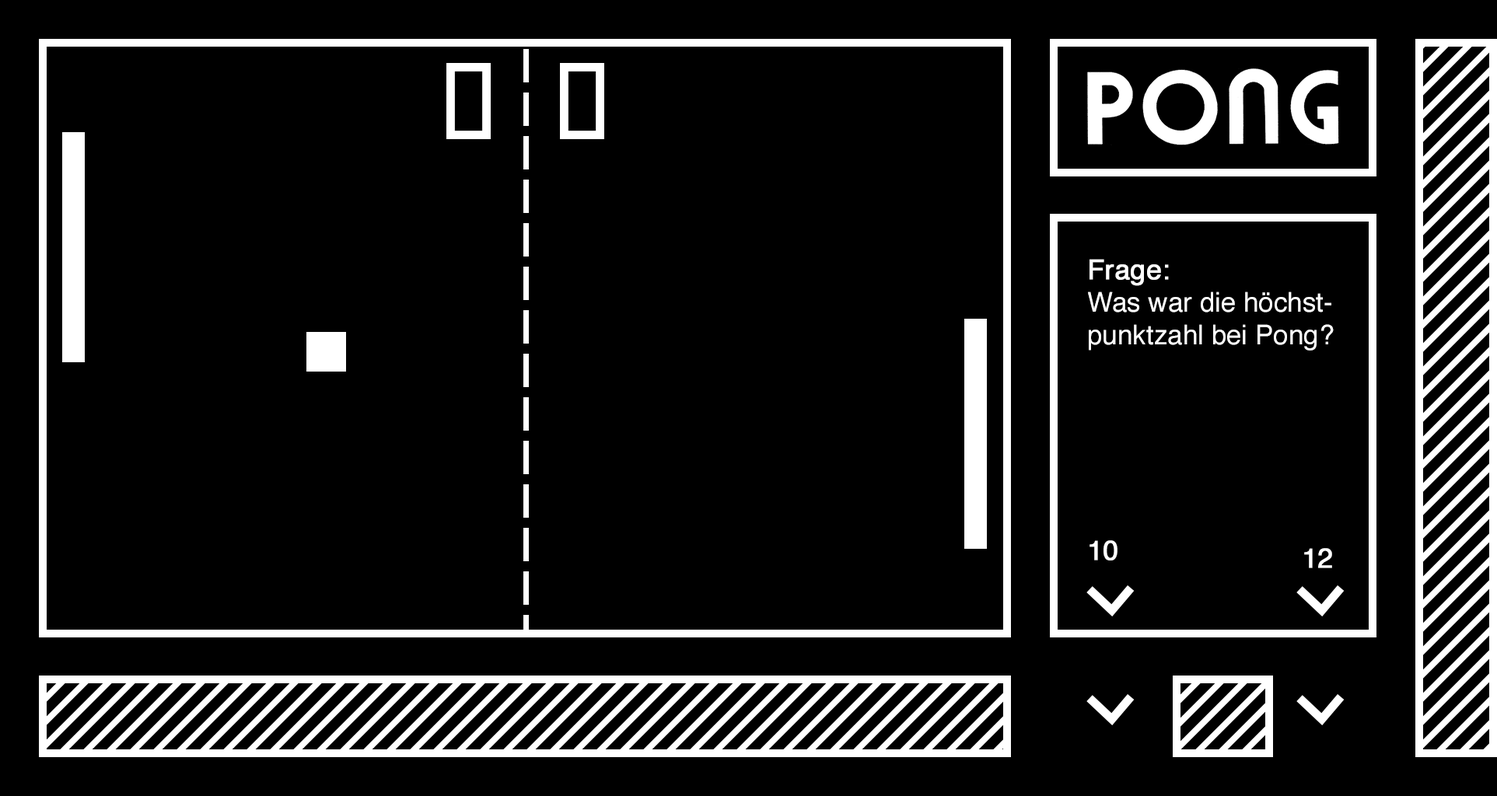
<style>
.page{position:relative;width:1497px;height:796px;background:#000000}
.page>*{position:absolute;margin:0}
.t1{font:27.2px "Helvetica";color:#ffffff}
.t2{font:27.2px "Helvetica";color:#ffffff;font-weight:bold}
</style>
<div class="page">
<p class="t1" style="left:1088px;top:259px;width:246px;height:92px"><span class="t2">Frage:<br></span>Was war die höchstpunktzahl bei Pong?</p>
<p class="t2" style="left:1090px;top:541px;width:28px;height:20px">10</p>
<p class="t2" style="left:1304px;top:548px;width:28px;height:21px">12</p>
</div>
